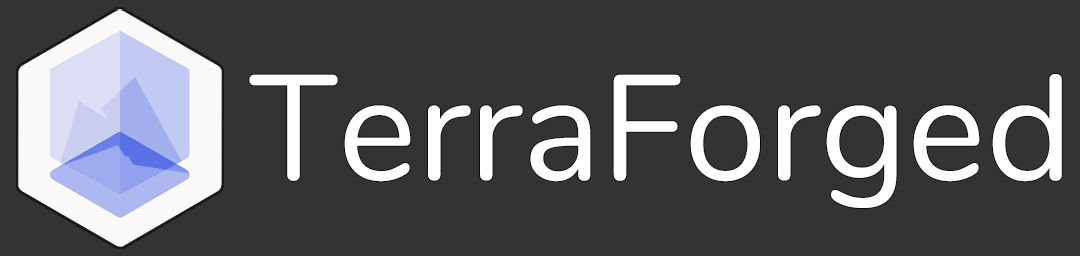
<style>
.page{position:relative;width:1080px;height:256px;background:#333333}
.page>*{position:absolute;margin:0}
.t1{font:149.3px "Nunito-Regular";color:#ffffff}
</style>
<div class="page">
<p class="t1" style="left:249px;top:74px;width:813px;height:134px">TerraForged</p>
</div>
